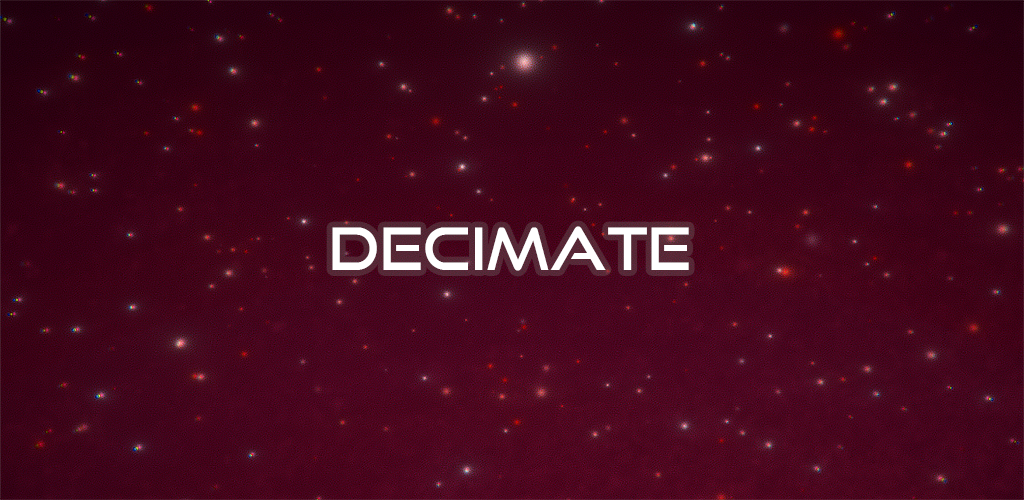
<style>
.page{position:relative;width:1024px;height:500px}
.page>*{position:absolute;margin:0}
.t1{font:57.9px "GoodTimesRg-Regular";color:#ffffff}
</style>
<div class="page">
<p class="t1" style="left:332px;top:226px;width:357px;height:45px;opacity:0.09">DECIMATE</p>
<p class="t1" style="left:332px;top:226px;width:357px;height:45px">DECIMATE</p>
</div>
